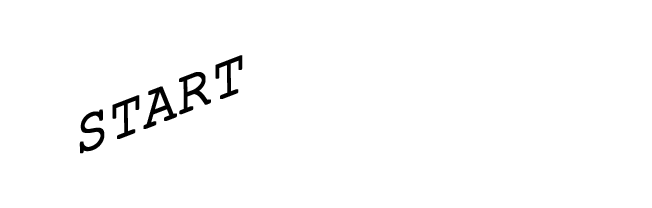
<style>
.page{position:relative;width:652px;height:208px;background:#ffffff}
.page>*{position:absolute;margin:0}
.t1{font:60.4px "CourierNewPSMT";color:#000000;font-weight:bold;scale:0.97 1}
</style>
<div class="page">
<p class="t1" style="left:79px;top:55px;width:164px;height:99px;rotate:-21deg">START</p>
</div>
